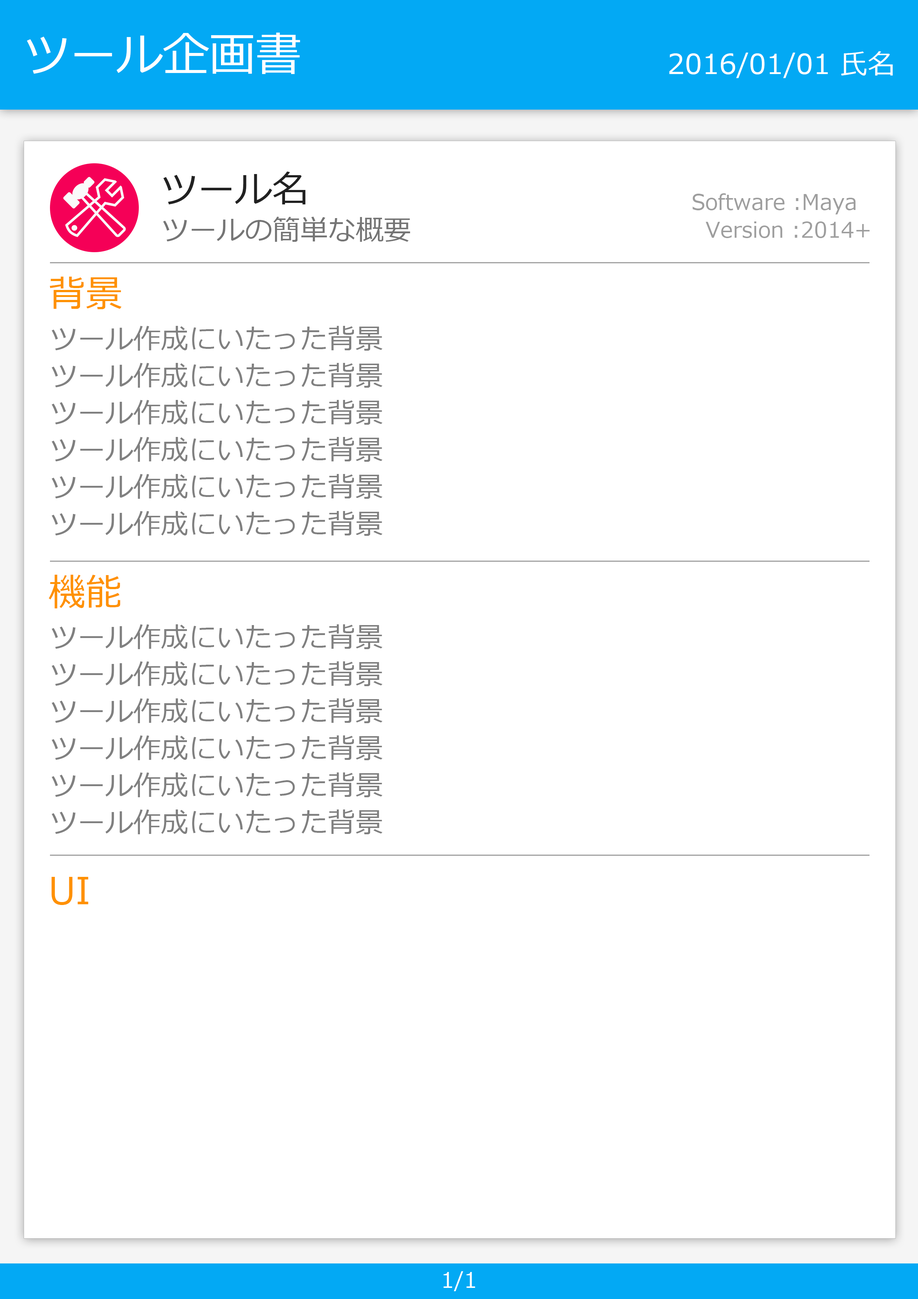
<style>
.page{position:relative;width:918px;height:1299px;background:#ffffff}
.page>*{position:absolute;margin:0}
.t1{font:46.3px "Meiryo";color:#ffffff}
.t2{font:27.8px "Meiryo";color:#ffffff}
.t3{font:37px "Meiryo";color:#212121}
.t4{font:21.6px/27.8px "Meiryo";color:#9e9e9e}
.t5{font:27.8px "Meiryo";color:#757575}
.t6{font:37px "Meiryo";color:#ff9100}
.t7{font:27.8px/37px "Meiryo";color:#808080}
.t8{font:21.6px "Meiryo";color:#ffffff}
</style>
<div class="page">
<p class="t1" style="left:27px;top:33px;width:273px;height:41px">ツール企画書</p>
<p class="t2" style="left:669px;top:51px;width:224px;height:27px">2016/01/01 氏名</p>
<p class="t3" style="left:163px;top:171px;width:142px;height:33px">ツール名</p>
<p class="t4" style="left:693px;top:193px;width:177px;height:45px;text-align:right">Software :Maya  <br>Version :2014+</p>
<p class="t5" style="left:163px;top:217px;width:247px;height:25px">ツールの簡単な概要</p>
<p class="t6" style="left:50px;top:277px;width:72px;height:32px">背景</p>
<p class="t7" style="left:51px;top:326px;width:331px;height:210px">ツール作成にいたった背景<br>ツール作成にいたった背景<br>ツール作成にいたった背景<br>ツール作成にいたった背景<br>ツール作成にいたった背景<br>ツール作成にいたった背景</p>
<p class="t6" style="left:49px;top:575px;width:71px;height:33px">機能</p>
<p class="t7" style="left:51px;top:624px;width:331px;height:210px">ツール作成にいたった背景<br>ツール作成にいたった背景<br>ツール作成にいたった背景<br>ツール作成にいたった背景<br>ツール作成にいたった背景<br>ツール作成にいたった背景</p>
<p class="t6" style="left:51px;top:877px;width:37px;height:28px">UI</p>
<p class="t8" style="left:444px;top:1271px;width:31px;height:20px">1/1</p>
</div>
